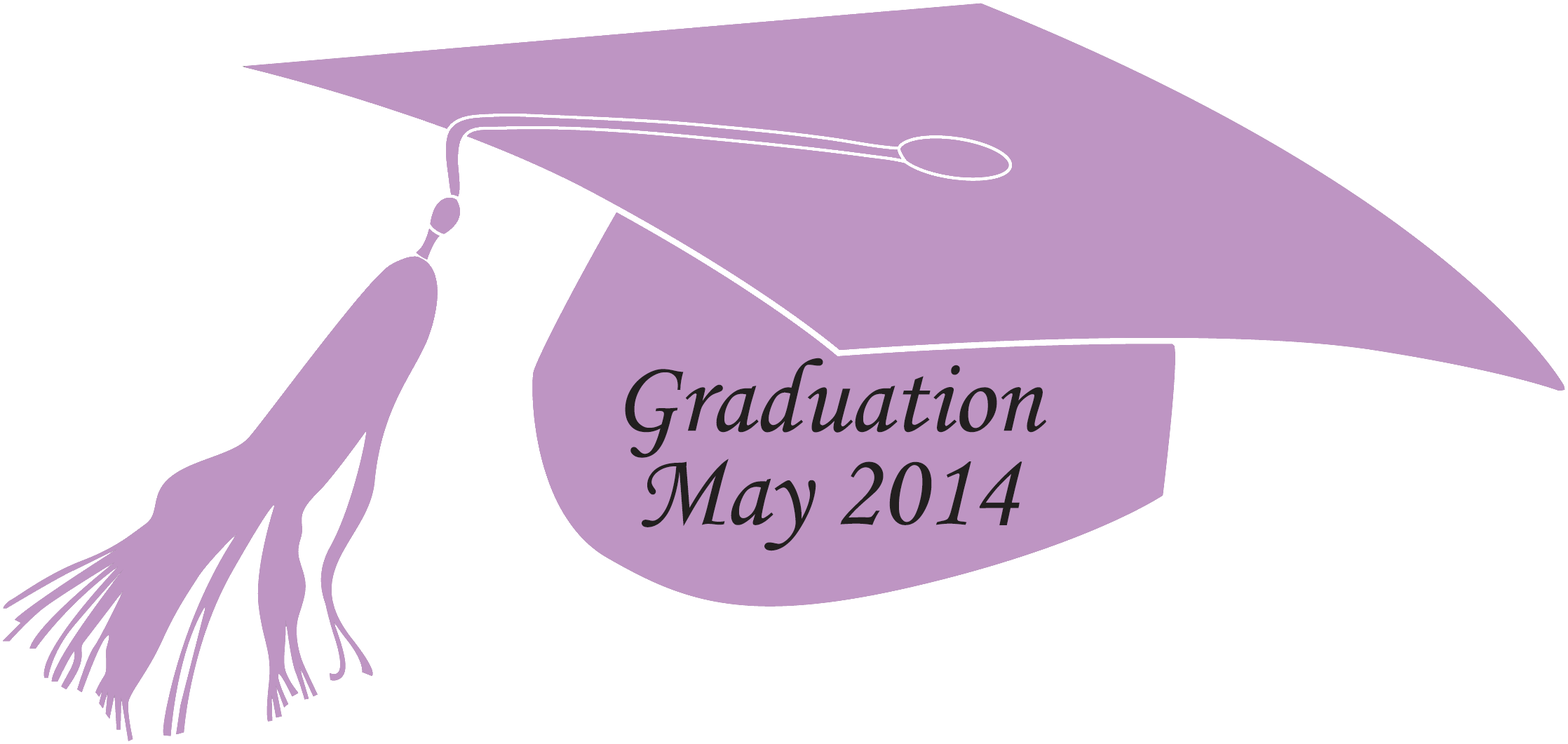
<style>
.page{position:relative;width:1568px;height:744px;background:#ffffff}
.page>*{position:absolute;margin:0}
.t1{font:105.2px/93px "MonotypeCorsiva";color:#221f1f}
</style>
<div class="page">
<p class="t1" style="left:625px;top:358px;width:421px;height:193px;text-align:center">Graduation<br>May 2014</p>
</div>
